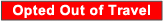
<style>
.page{position:relative;width:164px;height:22px;background:#fe0000}
.page>*{position:absolute;margin:0}
.t1{font:14px "Arial-BoldMT";letter-spacing:0.014em;color:#ffffff}
</style>
<div class="page">
<p class="t1" style="left:13px;top:4px;width:137px;height:14px">Opted Out of Travel</p>
</div>
